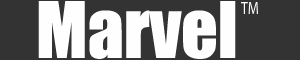
<style>
.page{position:relative;width:300px;height:60px;background:#333333}
.page>*{position:absolute;margin:0}
.t1{font:72px "Impact";color:#fffefe}
</style>
<div class="page">
<p class="t1" style="left:38px;top:1px;width:198px;height:58px">Marvel</p>
</div>
